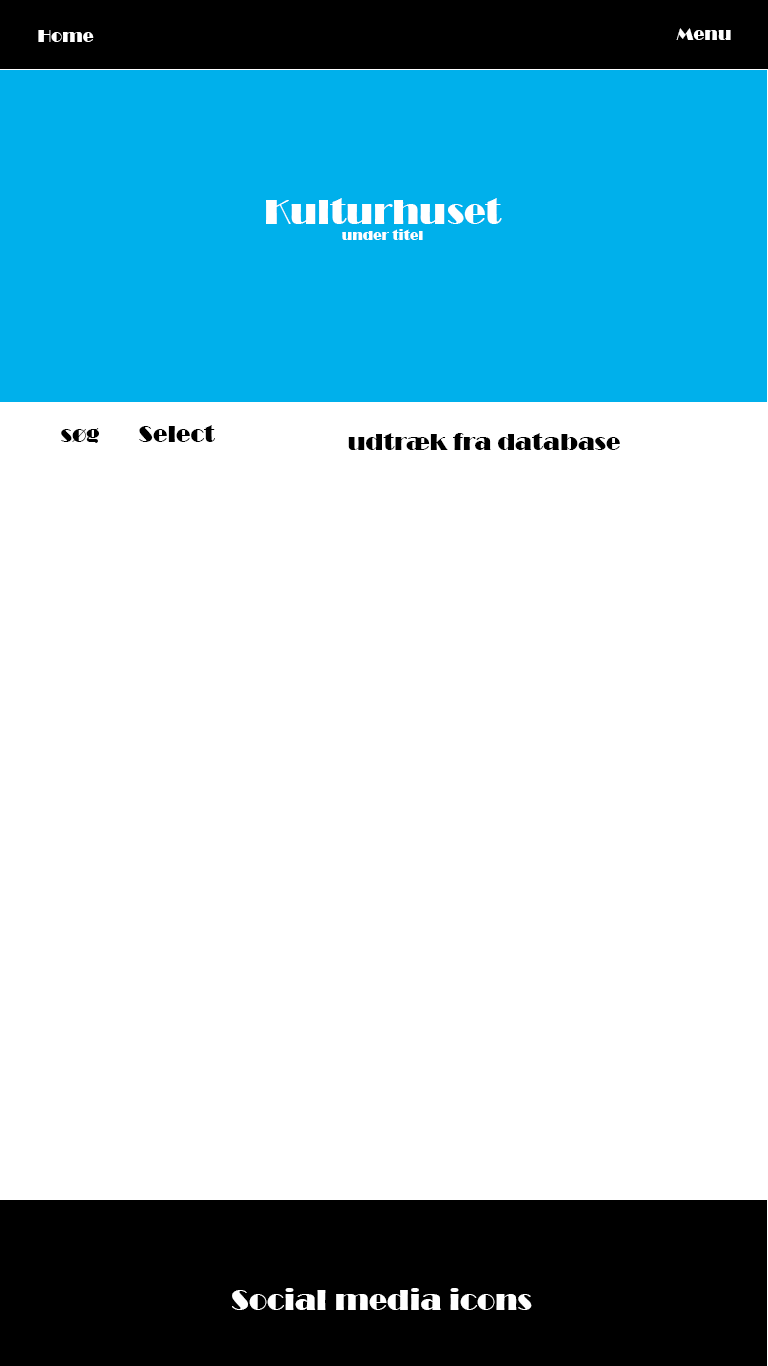
<style>
.page{position:relative;width:768px;height:1366px;background:#ffffff}
.page>*{position:absolute;margin:0}
.t1{font:18px "Broadway";color:#ffffff}
.t2{font:36px "Broadway";color:#ffffff}
.t3{font:14px "Broadway";color:#ffffff}
.t4{font:24px "Broadway";color:#000000}
.t5{font:30px "Broadway";color:#ffffff}
</style>
<div class="page">
<p class="t1" style="left:38px;top:30px;width:56px;height:12px">Home</p>
<p class="t1" style="left:676px;top:28px;width:55px;height:12px">Menu</p>
<p class="t2" style="left:266px;top:198px;width:236px;height:42px;text-align:center">Kulturhuset<br><span class="t3">under titel</span></p>
<p class="t4" style="left:139px;top:425px;width:76px;height:17px">Select</p>
<p class="t4" style="left:61px;top:428px;width:38px;height:15px">søg</p>
<p class="t4" style="left:348px;top:433px;width:272px;height:17px">udtræk fra database</p>
<p class="t5" style="left:232px;top:1288px;width:300px;height:22px"><span class="t4"><br><br><br></span>Social media icons</p>
</div>
